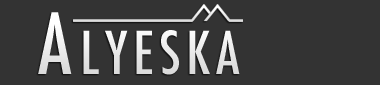
<style>
.page{position:relative;width:380px;height:85px;background:#333333}
.page>*{position:absolute;margin:0}
.t1{font:82.1px "Futura-CondensedMedium";letter-spacing:0.1em;color:#e9e9e9;font-variant:small-caps}
</style>
<div class="page">
<p class="t1" style="left:38px;top:12px;width:202px;height:63px">Alyeska</p>
</div>
